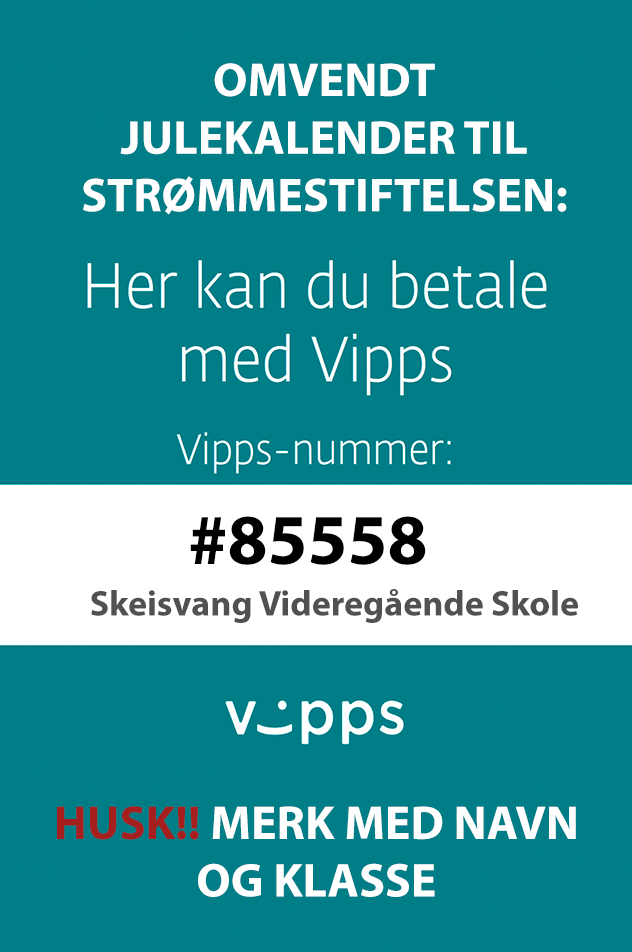
<style>
.page{position:relative;width:632px;height:952px;background:#007e87}
.page>*{position:absolute;margin:0}
.t1{font:48px "MyriadPro-Bold";color:#ffffff}
.t2{font:72px "MyriadPro-Bold";color:#000000}
.t3{font:36px "MyriadPro-Bold";color:#525050}
.t4{font:48px "MyriadPro-Bold";color:#a61f1f}
</style>
<div class="page">
<p class="t1" style="left:83px;top:63px;width:484px;height:152px;text-align:center">OMVENDT JULEKALENDER TIL STRØMMESTIFTELSEN:</p>
<p class="t2" style="left:190px;top:516px;width:236px;height:49px">#85558</p>
<p class="t3" style="left:91px;top:589px;width:487px;height:34px">Skeisvang Videregående Skole</p>
<p class="t1" style="left:57px;top:806px;width:519px;height:91px;text-align:center"><span class="t4">HUSK!! </span>MERK MED NAVN OG KLASSE</p>
</div>
